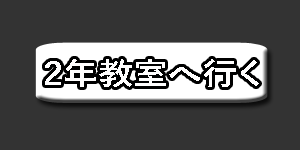
<style>
.page{position:relative;width:300px;height:150px;background:#333333}
.page>*{position:absolute;margin:0}
.t1{font:30.8px "YuGothic-Bold";color:#fffefe;scale:1.13 1}
</style>
<div class="page">
<p class="t1" style="left:45px;top:59px;width:214px;height:28px">2年教室へ行く</p>
</div>
